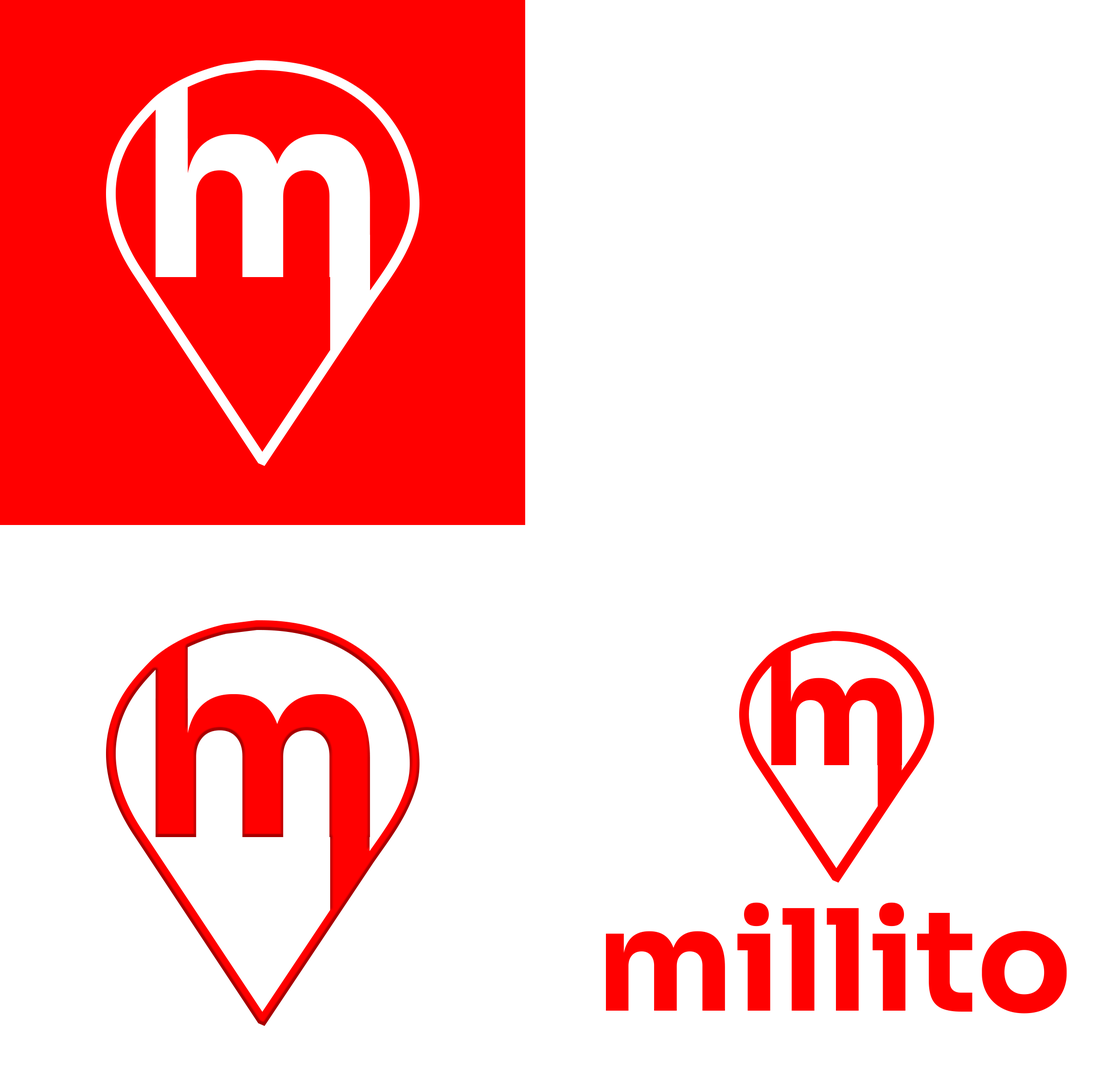
<style>
.page{position:relative;width:1099px;height:1085px;background:#ffffff}
.page>*{position:absolute;margin:0}
.t1{font:253px "Sora-Bold";color:#ffffff}
.t2{font:154.2px "Sora-Bold";color:#ff0000}
.t3{font:253px "Sora-Bold";color:#ff0000}
.t4{font:140.4px "Sora-Bold";color:#ff0000}
</style>
<div class="page">
<p class="t1" style="left:155px;top:134px;width:215px;height:143px">m</p>
<p class="t2" style="left:771px;top:678px;width:131px;height:87px">m</p>
<p class="t3" style="left:155px;top:694px;width:215px;height:143px">m</p>
<p class="t4" style="left:606px;top:902px;width:461px;height:112px">millito</p>
</div>
